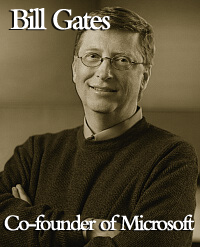
<style>
.page{position:relative;width:200px;height:247px}
.page>*{position:absolute;margin:0}
.t1{font:31.2px "BemboMT-SemiBold";letter-spacing:-0.08em;color:#ffffff;scale:0.95 1}
.t2{font:22.9px "BemboMT-SemiBold";letter-spacing:-0.08em;color:#ffffff;scale:0.95 1}
</style>
<div class="page">
<p class="t1" style="left:10px;top:8px;width:101px;height:22px">Bill Gates</p>
<p class="t2" style="left:4px;top:214px;width:191px;height:17px">Co-founder of Microsoft</p>
</div>
